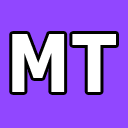
<style>
.page{position:relative;width:128px;height:128px;background:#9147ff}
.page>*{position:absolute;margin:0}
.t1{font:79.5px "Verdana-Bold";letter-spacing:0.01em;color:#ffffff;scale:0.86 1}
</style>
<div class="page">
<p class="t1" style="left:12px;top:34px;width:104px;height:58px">MT</p>
</div>
